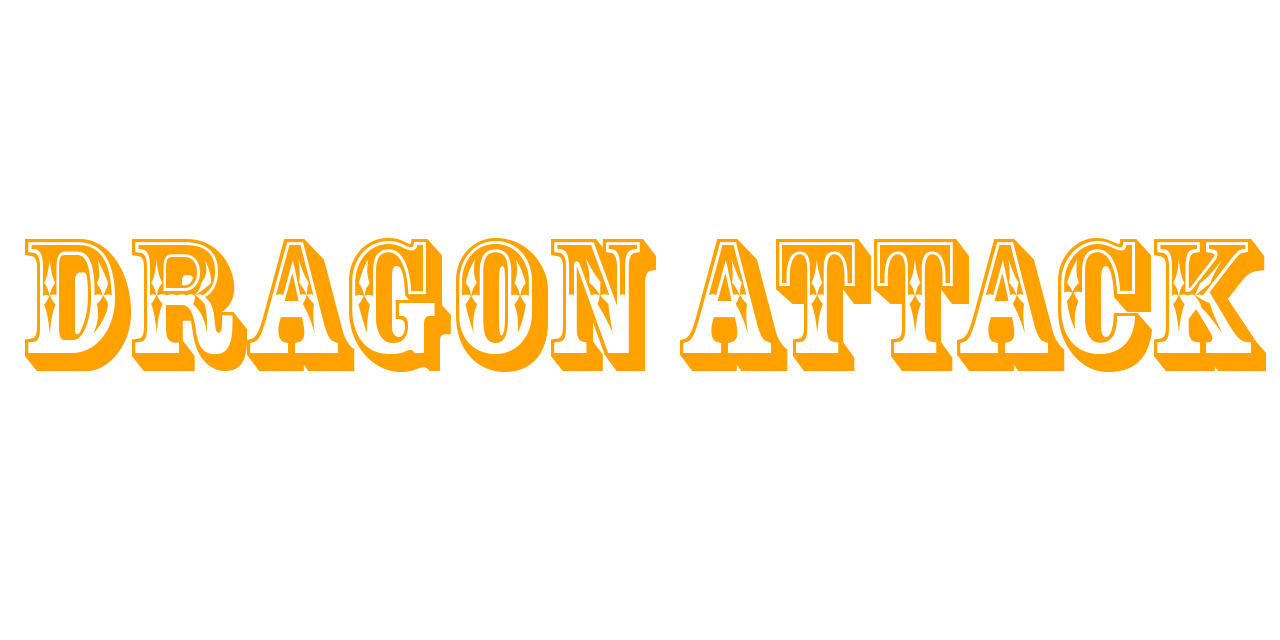
<style>
.page{position:relative;width:1280px;height:640px;background:#ffffff}
.page>*{position:absolute;margin:0}
.t1{font:176px "RosewoodStd-Regular";color:#ffa200}
.t2{font:200px "MyriadPro-Regular";color:#000000}
</style>
<div class="page">
<p class="t1" style="left:25px;top:238px;width:1241px;height:135px"><span class="t2"><br></span>Dragon Attack</p>
</div>
